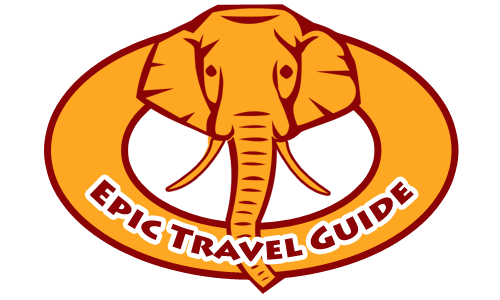
<style>
.page{position:relative;width:500px;height:300px;background:#ffffff}
.page>*{position:absolute;margin:0}
.t1{font:30px "LithosPro-Black";color:#8b0305}
</style>
<div class="page">
<p class="t1" style="left:89px;top:179px;width:325px;height:83px;text-align:right">Epic Travel Guide</p>
</div>
